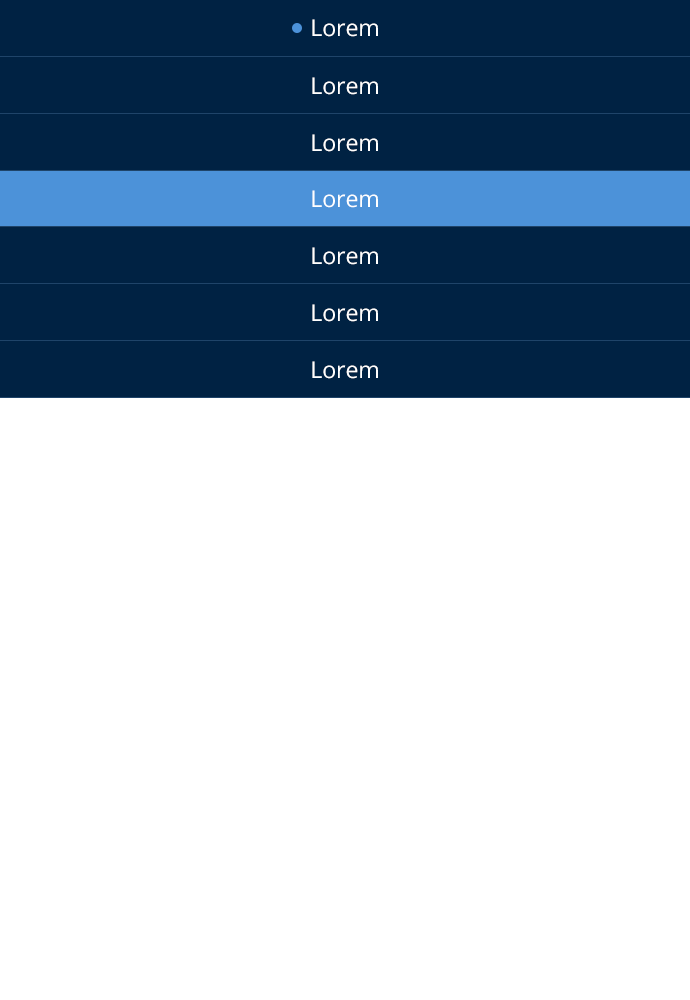
<style>
.page{position:relative;width:690px;height:1000px;background:#ffffff}
.page>*{position:absolute;margin:0}
.t1{font:23px "OpenSans";color:#ffffff}
</style>
<div class="page">
<p class="t1" style="left:312px;top:19px;width:66px;height:18px">Lorem</p>
<p class="t1" style="left:312px;top:77px;width:66px;height:18px">Lorem</p>
<p class="t1" style="left:312px;top:134px;width:66px;height:18px">Lorem</p>
<p class="t1" style="left:312px;top:190px;width:66px;height:18px">Lorem</p>
<p class="t1" style="left:312px;top:247px;width:66px;height:18px">Lorem</p>
<p class="t1" style="left:312px;top:304px;width:66px;height:18px">Lorem</p>
<p class="t1" style="left:312px;top:361px;width:66px;height:18px">Lorem</p>
</div>
